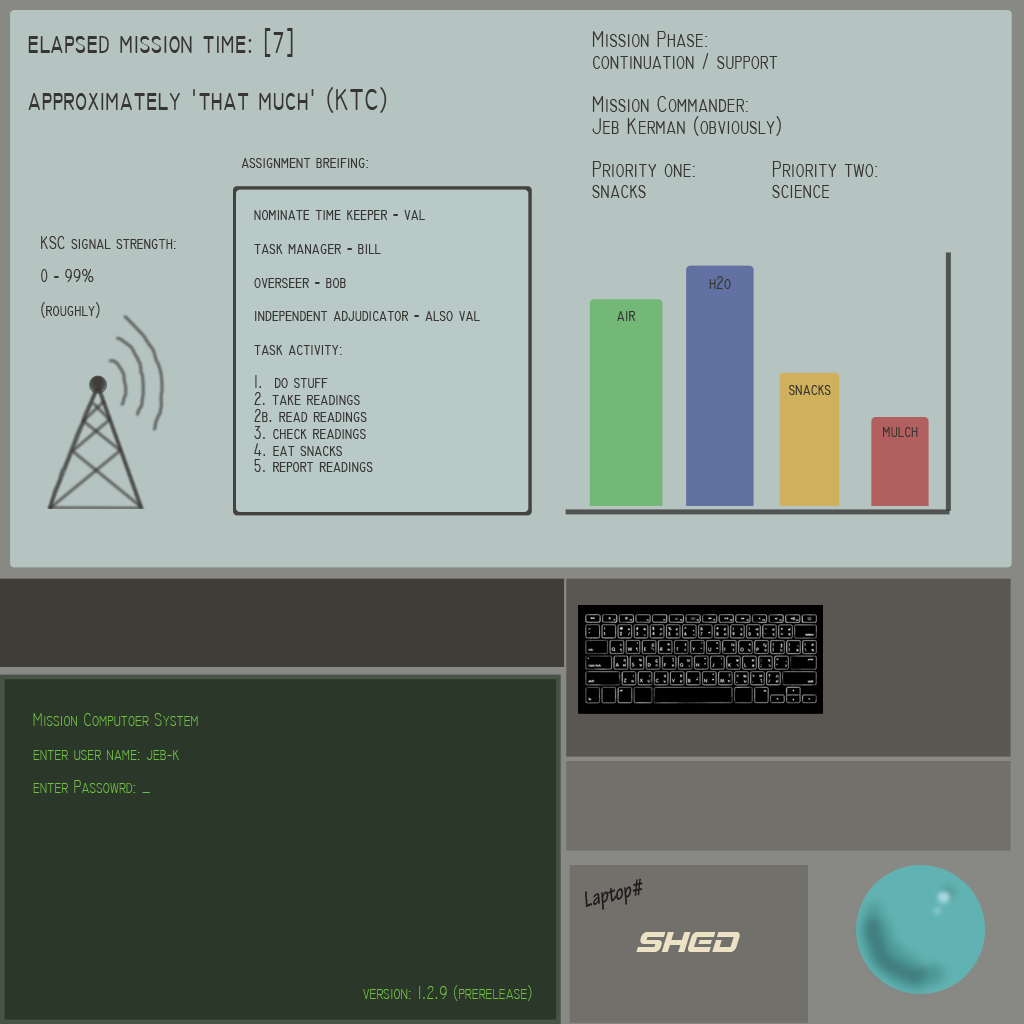
<style>
.page{position:relative;width:1024px;height:1024px;background:#b5c3c1}
.page>*{position:absolute;margin:0}
.t1{font:31.2px "Technic";color:#373531;scale:0.77 1}
.t2{font:23.4px "Technic";color:#373531;scale:0.77 1}
.t3{font:18.2px "Technic";color:#373531;scale:0.77 1}
.t4{font:18.2px "TechnicLite";color:#70bf44;scale:0.77 1}
.t5{font:23.4px "TektonPro-BoldObl";color:#1e1d1c;scale:0.77 1}
.t6{font:31.2px "GunshipItalic";color:#ede2c6;scale:0.77 1}
</style>
<div class="page">
<p class="t1" style="left:28px;top:28px;width:359px;height:85px">elapsed mission time: [7]<br><br>approximately 'that much' (KTC)</p>
<p class="t2" style="left:592px;top:31px;width:286px;height:167px">Mission Phase: <br>continuation / support<br><br>Mission Commander: <br>Jeb Kerman (obviously)<br><br>Priority one:   Priority two:<br>snacks    science</p>
<p class="t3" style="left:241px;top:158px;width:127px;height:10px">assignment breifing:</p>
<p class="t3" style="left:254px;top:210px;width:226px;height:262px">nominate time keeper - val<br><br>task manager - bill<br><br>overseer - bob<br><br>independent adjudicator - also val<br><br>task activity:<br><br>1.  do stuff<br>2. take readings<br>2b. read readings<br>3. check readings<br>4. eat snacks<br>5. report readings</p>
<p class="t3" style="left:41px;top:236px;width:135px;height:82px">KSC signal strength:<br><br>0 - 99%<br><br>(roughly)</p>
<p class="t3" style="left:709px;top:276px;width:22px;height:13px">h2o</p>
<p class="t3" style="left:617px;top:311px;width:18px;height:10px">air</p>
<p class="t3" style="left:789px;top:385px;width:42px;height:10px">snacks</p>
<p class="t3" style="left:883px;top:427px;width:35px;height:10px">mulch</p>
<p class="t4" style="left:33px;top:713px;width:165px;height:80px">Mission Computoer System<br><br>enter user name: jeb-k<br><br>enter Passowrd: _</p>
<p class="t5" style="left:585px;top:878px;width:58px;height:32px;rotate:-12deg">Laptop#</p>
<p class="t6" style="left:636px;top:932px;width:104px;height:20px">SHED</p>
<p class="t4" style="left:363px;top:985px;width:169px;height:16px">version: 1.2.9 (prerelease)</p>
</div>
